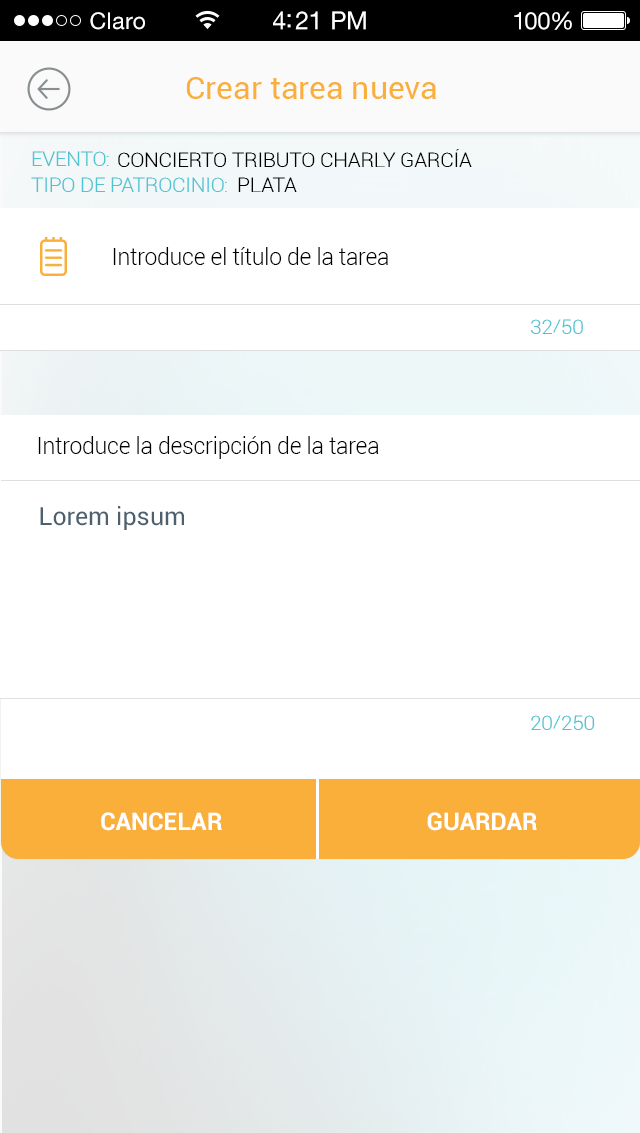
<style>
.page{position:relative;width:640px;height:1133px;background:#ffffff}
.page>*{position:absolute;margin:0}
.t1{font:23px "HelveticaNeueLTStd-Roman";letter-spacing:0.02em;color:#ffffff}
.t2{font:25px "HelveticaNeueLTStd-Roman";letter-spacing:-0.02em;color:#ffffff}
.t3{font:24px "HelveticaNeueLTStd-Roman";letter-spacing:-0.02em;color:#ffffff}
.t4{font:32px "Roboto-Regular";color:#faaf3a}
.t5{font:20.4px "Roboto-Light";letter-spacing:-0.01em;color:#000000}
.t6{font:20.4px "Roboto-Light";letter-spacing:-0.01em;color:#51c4d4}
.t7{font:22.9px "Roboto-Light";letter-spacing:-0.01em;color:#000000}
.t8{font:25px "Roboto-Regular";color:#4e5f6f}
.t9{font:24.1px "Roboto-Bold";color:#ffffff}
</style>
<div class="page">
<p class="t1" style="left:90px;top:12px;width:55px;height:18px">Claro</p>
<p class="t2" style="left:273px;top:11px;width:93px;height:19px">4:21 PM</p>
<p class="t3" style="left:514px;top:11px;width:58px;height:19px">100%</p>
<p class="t4" style="left:186px;top:77px;width:250px;height:22px">Crear tarea nueva</p>
<p class="t5" style="left:118px;top:149px;width:354px;height:18px">CONCIERTO TRIBUTO CHARLY GARCÍA</p>
<p class="t6" style="left:32px;top:151px;width:77px;height:15px">EVENTO:</p>
<p class="t6" style="left:31px;top:177px;width:196px;height:15px">TIPO DE PATROCINIO:</p>
<p class="t5" style="left:238px;top:177px;width:59px;height:15px">PLATA</p>
<p class="t7" style="left:113px;top:247px;width:275px;height:18px">Introduce el título de la tarea</p>
<p class="t6" style="left:531px;top:319px;width:52px;height:15px">32/50</p>
<p class="t7" style="left:38px;top:436px;width:341px;height:23px">Introduce la descripción de la tarea</p>
<p class="t8" style="left:40px;top:506px;width:144px;height:24px">Lorem ipsum</p>
<p class="t6" style="left:531px;top:715px;width:64px;height:15px">20/250</p>
<p class="t9" style="left:101px;top:812px;width:121px;height:19px">CANCELAR</p>
<p class="t9" style="left:427px;top:812px;width:110px;height:19px">GUARDAR</p>
</div>
